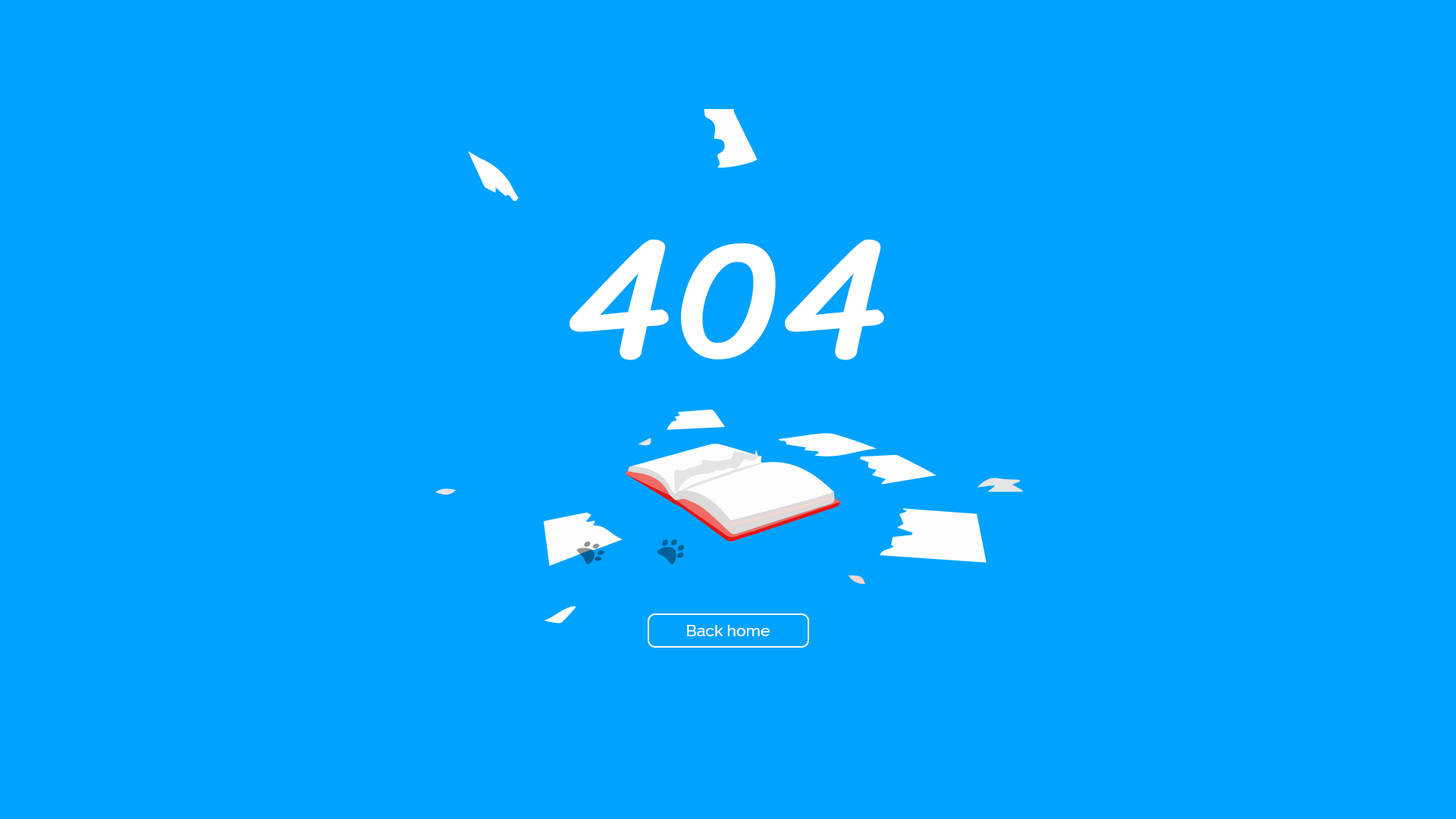
<style>
.page{position:relative;width:1456px;height:819px;background:#00a2ff}
.page>*{position:absolute;margin:0}
.t1{font:171.3px "SrirachaCyrillic";color:#ffffff}
.t2{font:15.9px "Raleway-Medium";color:#ffffff}
</style>
<div class="page">
<p class="t1" style="left:570px;top:239px;width:314px;height:121px">404</p>
<p class="t2" style="left:687px;top:625px;width:83px;height:11px">Back home</p>
</div>
